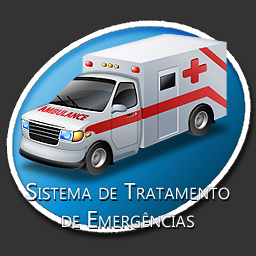
<style>
.page{position:relative;width:256px;height:256px;background:#333333}
.page>*{position:absolute;margin:0}
.t1{font:23px "SegoeUI";color:#ffffff;font-variant:small-caps}
</style>
<div class="page">
<p class="t1" style="left:26px;top:182px;width:204px;height:46px;text-align:center">Sistema de Tratamento          de Emergências</p>
</div>
